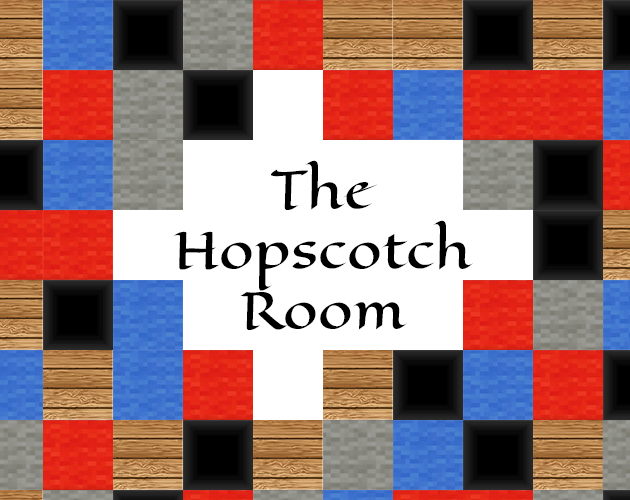
<style>
.page{position:relative;width:630px;height:500px;background:#ffffff}
.page>*{position:absolute;margin:0}
.t1{font:50px "EagleLake-Regular";color:#000000}
</style>
<div class="page">
<p class="t1" style="left:173px;top:160px;width:300px;height:170px;text-align:center">The<br>Hopscotch<br>Room</p>
</div>
